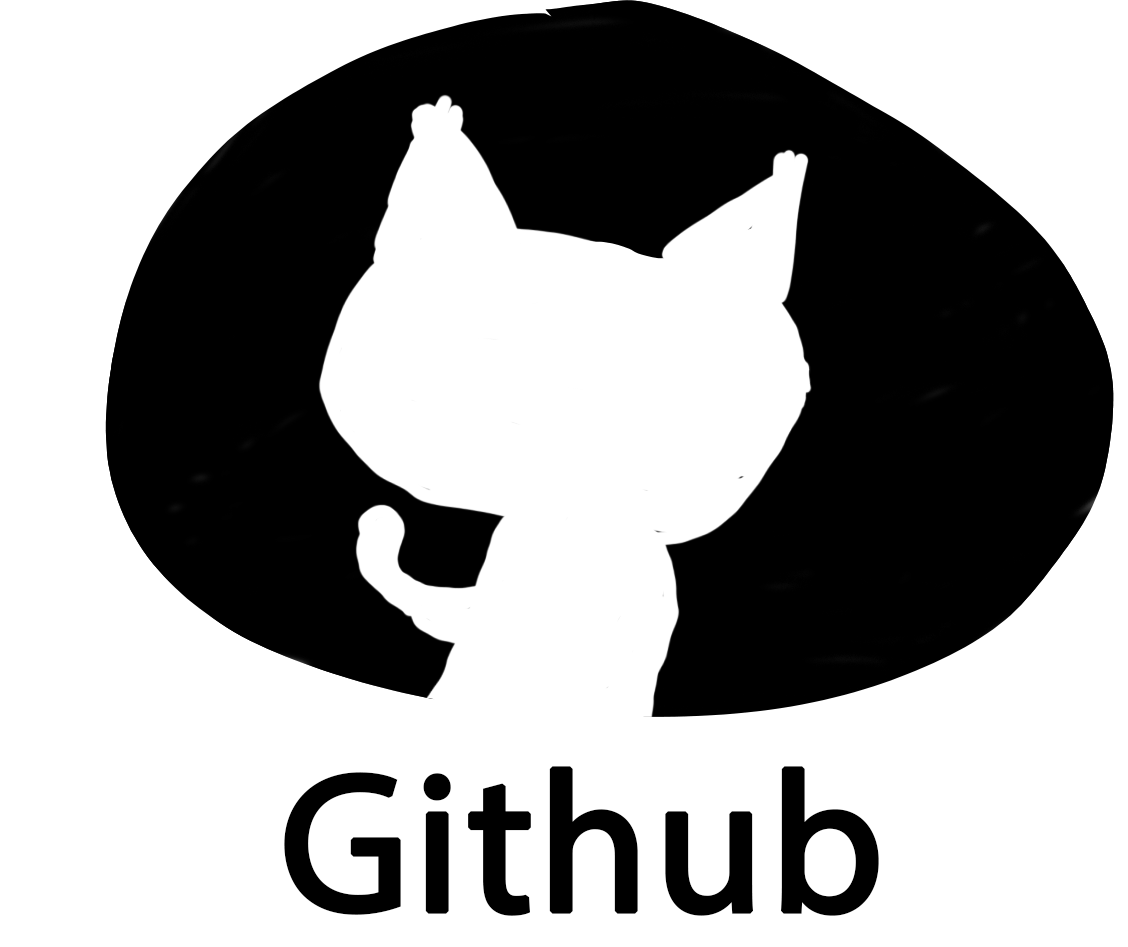
<style>
.page{position:relative;width:1128px;height:947px;background:#ffffff}
.page>*{position:absolute;margin:0}
.t1{font:200px "MyriadPro-Regular";color:#000000;font-weight:bold}
</style>
<div class="page">
<p class="t1" style="left:284px;top:766px;width:595px;height:150px">Github</p>
</div>
